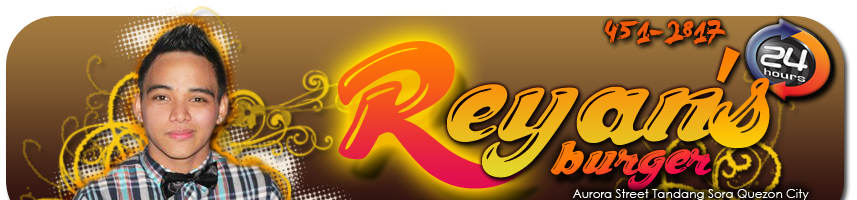
<style>
.page{position:relative;width:857px;height:200px}
.page>*{position:absolute;margin:0}
.t1{font:30px "LeviBrush";color:#f05908}
.t2{font:235.1px "ChocolateDealer-Bold"}
.t3{font:179px "ChocolateDealer-Bold"}
.t4{font:72px "ChocolateDealer-Bold"}
.t5{font:12px "CenturyGothic";color:#fefdfc}
</style>
<div class="page">
<p class="t1" style="left:604px;top:19px;width:122px;height:26px">451-2817</p>
<p class="t2" style="left:337px;top:41px;width:191px;height:148px">R</p>
<p class="t3" style="left:708px;top:78px;width:62px;height:70px">s</p>
<p class="t4" style="left:551px;top:140px;width:161px;height:51px">burger</p>
<p class="t5" style="left:573px;top:189px;width:236px;height:11px">Aurora Street Tandang Sora Quezon City</p>
</div>
